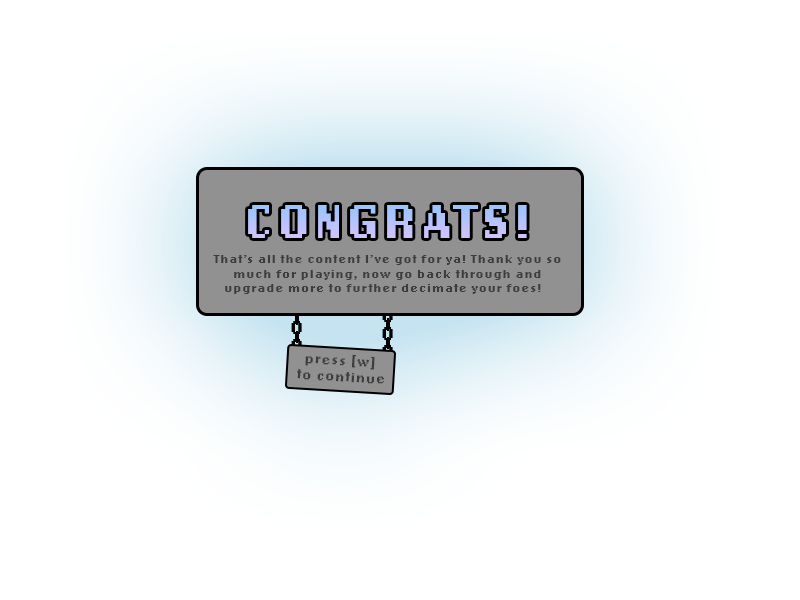
<style>
.page{position:relative;width:800px;height:600px;background:#ffffff}
.page>*{position:absolute;margin:0}
.t1{font:50px "LoRes12OT-Bold";letter-spacing:0.07em}
.t2{font:12.2px "LoRes12OT-Bold";letter-spacing:0.07em;color:#3d3d3d}
.t3{font:20px "LoRes12OT-Bold";letter-spacing:0.07em;color:#000000}
.t4{font:20px "LoRes12OT-Bold";letter-spacing:0.07em}
.t5{font:13.5px "LoRes12OT-Bold";letter-spacing:0.07em;color:#3d3d3d}
</style>
<div class="page">
<p class="t1" style="left:248px;top:205px;width:279px;height:33px">CONGRATS!</p>
<p class="t2" style="left:213px;top:255px;width:348px;height:39px;text-align:center">That’s all the content I’ve got for ya! Thank you so<br>much for playing, now go back through and<br>upgrade more to further decimate your foes!</p>
<p class="t3" style="left:382px;top:309px;width:11px;height:13px">0</p>
<p class="t3" style="left:291px;top:321px;width:11px;height:13px">0</p>
<p class="t3" style="left:382px;top:327px;width:11px;height:13px">0</p>
<p class="t4" style="left:291px;top:339px;width:11px;height:13px">0</p>
<p class="t4" style="left:382px;top:345px;width:11px;height:13px">0</p>
<p class="t5" style="left:297px;top:354px;width:87px;height:30px;text-align:center;rotate:3deg">press [w] <br>to continue</p>
</div>
